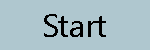
<style>
.page{position:relative;width:150px;height:50px;background:#afc7cf}
.page>*{position:absolute;margin:0}
.t1{font:32px "SegoeUI";color:#000000}
</style>
<div class="page">
<p class="t1" style="left:44px;top:14px;width:62px;height:23px">Start</p>
</div>
